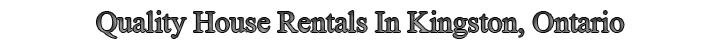
<style>
.page{position:relative;width:709px;height:46px;background:#ffffff}
.page>*{position:absolute;margin:0}
.t1{font:30px "TimesNewRomanPSMT"}
</style>
<div class="page">
<p class="t1" style="left:97px;top:11px;width:527px;height:27px">Quality House Rentals In Kingston, Ontario</p>
</div>
